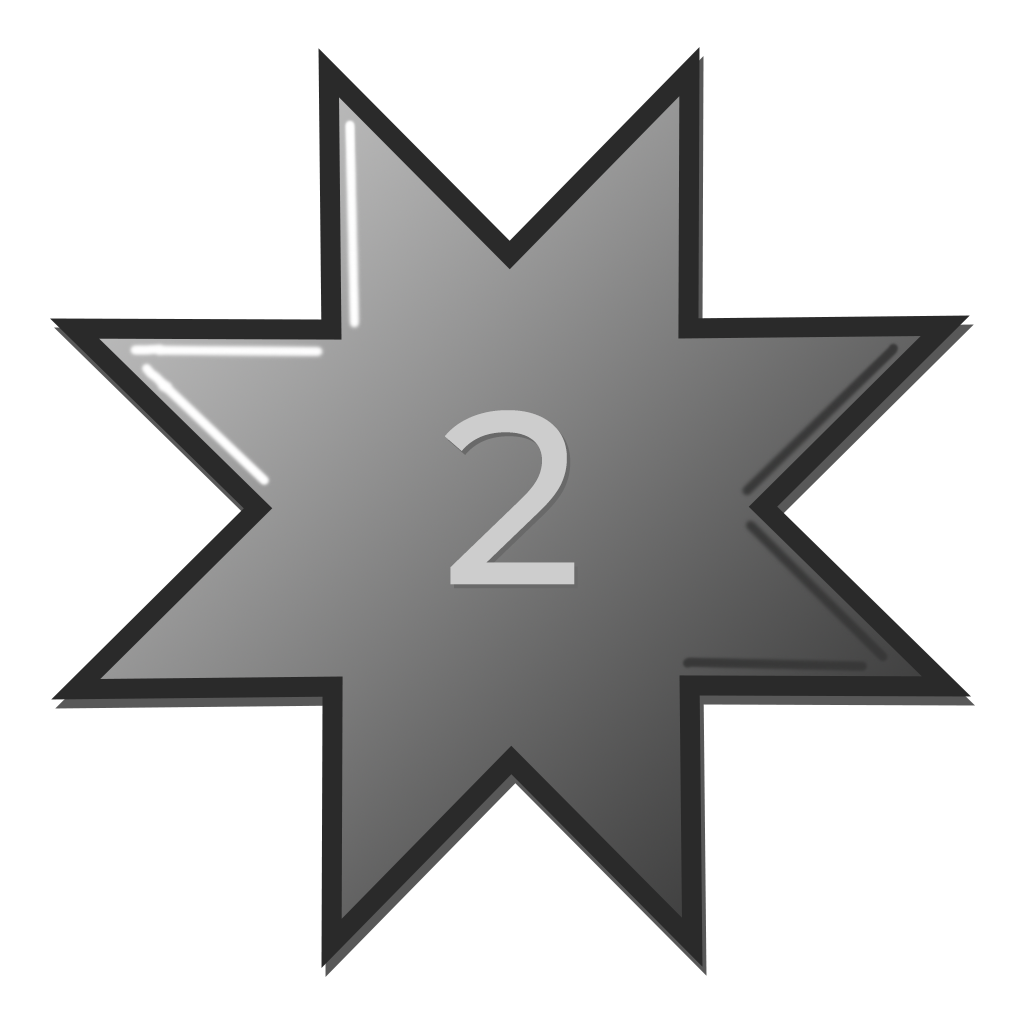
<style>
.page{position:relative;width:1024px;height:1024px;background:#ffffff}
.page>*{position:absolute;margin:0}
.t1{font:245.4px "Montserrat-Medium";color:#cdcdcd}
</style>
<div class="page">
<p class="t1" style="left:445px;top:410px;width:130px;height:175px">2</p>
<p class="t1" style="left:448px;top:414px;width:130px;height:175px">2</p>
</div>
